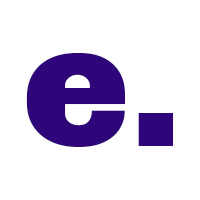
<style>
.page{position:relative;width:200px;height:200px;background:#ffffff}
.page>*{position:absolute;margin:0}
.t1{font:180px "Chivo-Black";color:#2e067a}
</style>
<div class="page">
<p class="t1" style="left:26px;top:53px;width:148px;height:94px">e.</p>
</div>
